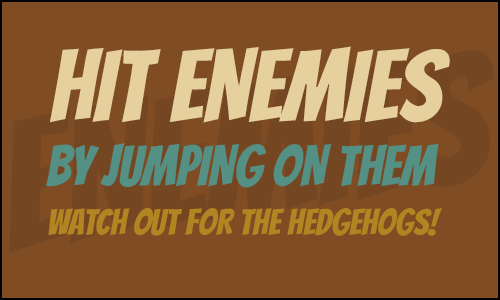
<style>
.page{position:relative;width:500px;height:300px;background:#7f4c23}
.page>*{position:absolute;margin:0}
.t1{font:100px "Bangers-Regular";color:#e6d09e}
.t2{font:56px "Bangers-Regular";color:#549084}
.t3{font:36px "Bangers-Regular";color:#b28522}
</style>
<div class="page">
<p class="t1" style="left:50px;top:46px;width:400px;height:77px">HIT ENEMIES</p>
<p class="t2" style="left:46px;top:143px;width:393px;height:45px">BY JUMPING ON THEM</p>
<p class="t3" style="left:48px;top:208px;width:394px;height:28px">WATCH OUT FOR THE HEDGEHOGS!</p>
</div>
